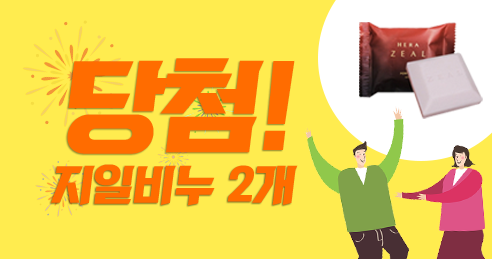
<style>
.page{position:relative;width:492px;height:259px;background:#ffec4f}
.page>*{position:absolute;margin:0}
.t1{font:100px "KoreanRKT-R";letter-spacing:-0.005em;color:#ff6c00}
.t2{font:41.7px "KoreanRKT-R";letter-spacing:-0.005em;color:#ff6c00}
</style>
<div class="page">
<p class="t1" style="left:67px;top:58px;width:228px;height:96px">당첨!</p>
<p class="t2" style="left:51px;top:164px;width:247px;height:42px">지일비누 2개</p>
</div>
